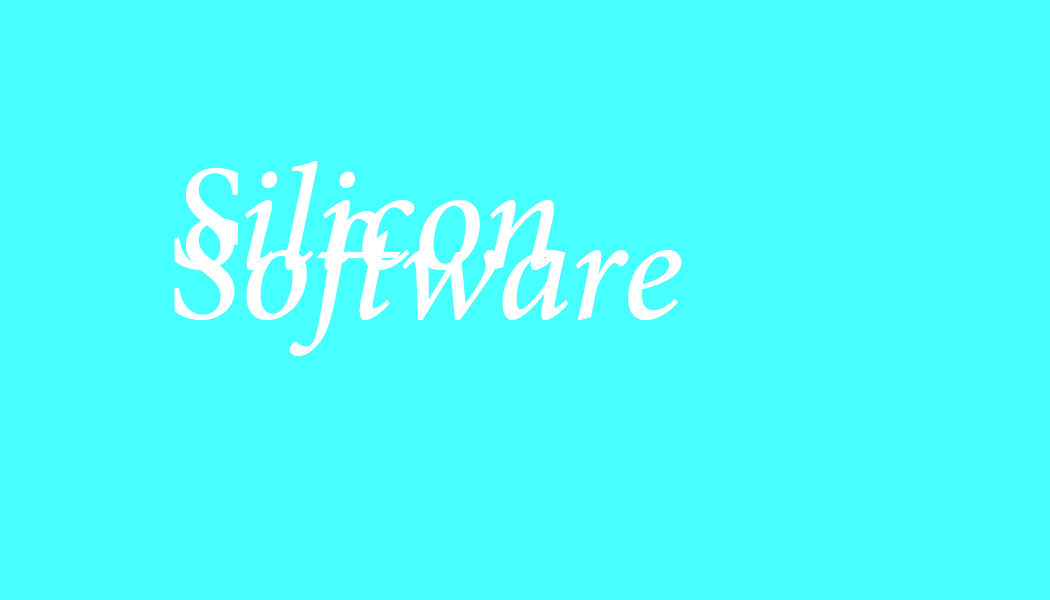
<style>
.page{position:relative;width:1050px;height:600px;background:#48ffff}
.page>*{position:absolute;margin:0}
.t1{font:150px/25px "MinionPro-MediumIt";color:#ffffff}
</style>
<div class="page">
<p class="t1" style="left:174px;top:161px;width:508px;height:195px">Silicon<br><br>Software</p>
</div>
